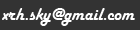
<style>
.page{position:relative;width:140px;height:30px;background:#333333}
.page>*{position:absolute;margin:0}
.t1{font:18px "HarlowSolid";color:#ffffff}
</style>
<div class="page">
<p class="t1" style="left:2px;top:8px;width:133px;height:18px">xrh.sky@gmail.com</p>
</div>
